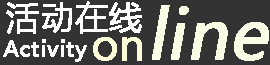
<style>
.page{position:relative;width:270px;height:65px;background:#333333}
.page>*{position:absolute;margin:0}
.t1{font:33.3px "MicrosoftYaHei";color:#feffff;font-weight:bold}
.t2{font:66.7px "MicrosoftYaHei";color:#fafee5;font-weight:bold;font-style:italic}
.t3{font:20.8px "MicrosoftYaHei";color:#fefefe;font-weight:bold}
.t4{font:41.7px "MicrosoftYaHei";color:#fcfcda;font-weight:bold}
</style>
<div class="page">
<p class="t1" style="left:6px;top:1px;width:136px;height:33px">活动在线</p>
<p class="t2" style="left:152px;top:5px;width:117px;height:56px">line</p>
<p class="t3" style="left:3px;top:39px;width:84px;height:23px">Activity</p>
<p class="t4" style="left:93px;top:37px;width:49px;height:24px">on</p>
</div>
